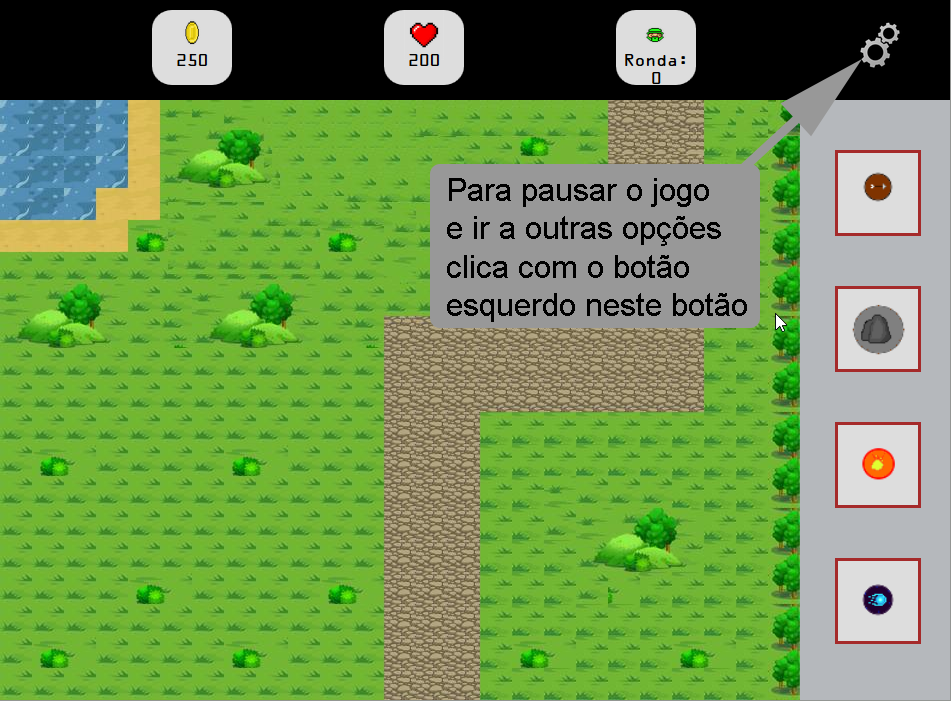
<style>
.page{position:relative;width:951px;height:701px}
.page>*{position:absolute;margin:0}
.t1{font:32px "ArialMT";color:#000000}
</style>
<div class="page">
<p class="t1" style="left:447px;top:178px;width:300px;height:144px">Para pausar o jogo<br>e ir a outras opções<br>clica com o botão<br>esquerdo neste botão</p>
</div>
